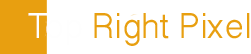
<style>
.page{position:relative;width:251px;height:54px;background:#ffffff}
.page>*{position:absolute;margin:0}
.t1{font:40px "OriyaSangamMN";color:#e89f10}
.t2{font:40px "OriyaSangamMN";color:#fefefe}
</style>
<div class="page">
<p class="t1" style="left:28px;top:13px;width:222px;height:33px"><span class="t2">Top</span> Right Pixel</p>
</div>
